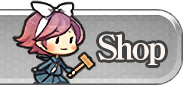
<style>
.page{position:relative;width:183px;height:85px}
.page>*{position:absolute;margin:0}
.t1{font:34px "RyuminPro-ExBold";letter-spacing:-0.08em;color:#fff5f0}
</style>
<div class="page">
<p class="t1" style="left:98px;top:34px;width:67px;height:31px">Shop</p>
</div>
